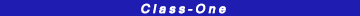
<style>
.page{position:relative;width:360px;height:16px;background:#1f1cb1}
.page>*{position:absolute;margin:0}
.t1{font:12.5px "Mangal-Bold";letter-spacing:0.2em;color:#ffffff;font-style:italic}
</style>
<div class="page">
<p class="t1" style="left:141px;top:3px;width:85px;height:11px">Class-One</p>
</div>
